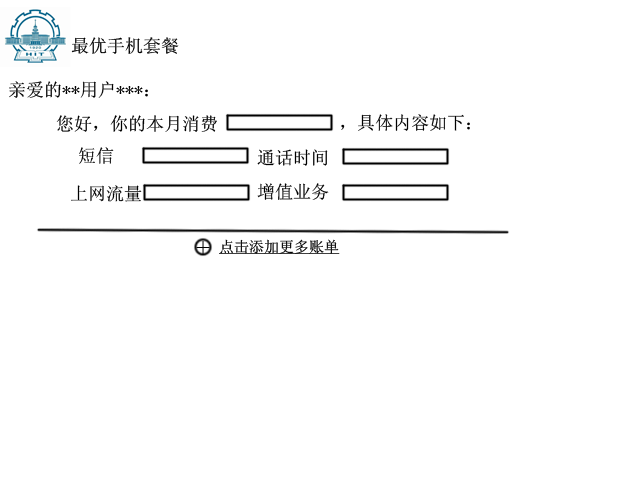
<style>
.page{position:relative;width:640px;height:480px;background:#ffffff}
.page>*{position:absolute;margin:0}
.t1{font:18px "SimSun";color:#000000}
.t2{font:15px "SimSun";color:#000000;text-decoration:underline}
</style>
<div class="page">
<p class="t1" style="left:71px;top:37px;width:108px;height:17px">最优手机套餐</p>
<p class="t1" style="left:9px;top:81px;width:139px;height:17px">亲爱的**用户***：</p>
<p class="t1" style="left:56px;top:115px;width:161px;height:17px">您好，你的本月消费</p>
<p class="t1" style="left:341px;top:114px;width:129px;height:17px">，具体内容如下：</p>
<p class="t1" style="left:79px;top:147px;width:35px;height:17px">短信</p>
<p class="t1" style="left:257px;top:149px;width:71px;height:17px">通话时间</p>
<p class="t1" style="left:71px;top:185px;width:71px;height:17px">上网流量</p>
<p class="t1" style="left:257px;top:183px;width:72px;height:17px">增值业务</p>
<p class="t2" style="left:219px;top:239px;width:121px;height:15px">点击添加更多账单</p>
</div>
